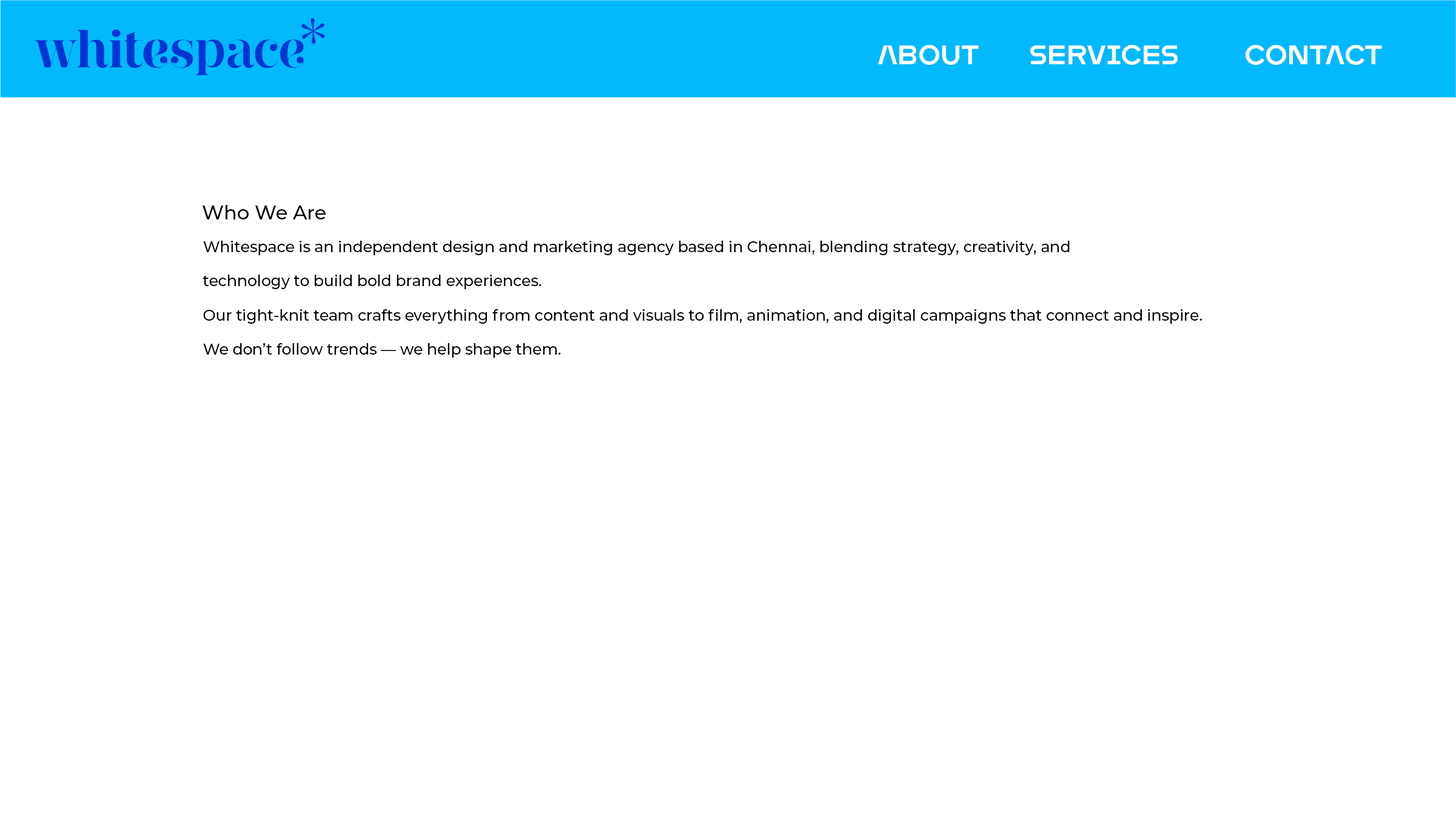
<style>
.page{position:relative;width:1456px;height:819px;background:#ffffff}
.page>*{position:absolute;margin:0}
.t1{font:27.2px "MonopolTRIAL-Regular";color:#ffffff}
.t2{font:19.5px "Montserrat-Medium";color:#000000}
.t3{font:15.2px/34.1px "Montserrat-Medium";color:#000000}
</style>
<div class="page">
<p class="t1" style="left:878px;top:45px;width:101px;height:20px">About</p>
<p class="t1" style="left:1030px;top:45px;width:147px;height:20px">Services</p>
<p class="t1" style="left:1245px;top:45px;width:137px;height:20px">Contact</p>
<p class="t2" style="left:203px;top:205px;width:123px;height:14px">Who We Are</p>
<p class="t3" style="left:203px;top:241px;width:999px;height:117px">Whitespace is an independent design and marketing agency based in Chennai, blending strategy, creativity, and <br>technology to build bold brand experiences.<br>Our tight-knit team crafts everything from content and visuals to film, animation, and digital campaigns that connect and inspire.<br>We don’t follow trends — we help shape them.</p>
</div>
